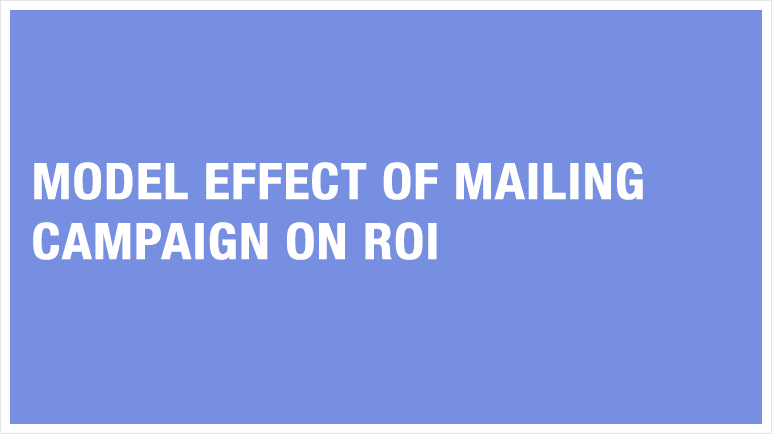
<style>
.page{position:relative;width:772px;height:434px;background:#768fe0}
.page>*{position:absolute;margin:0}
.t1{font:50px "HelveticaNeue-CondensedBold";color:#ffffff;font-weight:bold;scale:1.07 1}
</style>
<div class="page">
<p class="t1" style="left:33px;top:162px;width:610px;height:98px">MODEL EFFECT OF MAILING <br>CAMPAIGN ON ROI</p>
</div>
